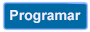
<style>
.page{position:relative;width:90px;height:32px;background:#006aa5}
.page>*{position:absolute;margin:0}
.t1{font:14px "Arial-BoldMT";color:#edf0ff}
</style>
<div class="page">
<p class="t1" style="left:10px;top:10px;width:71px;height:13px">Programar</p>
</div>
